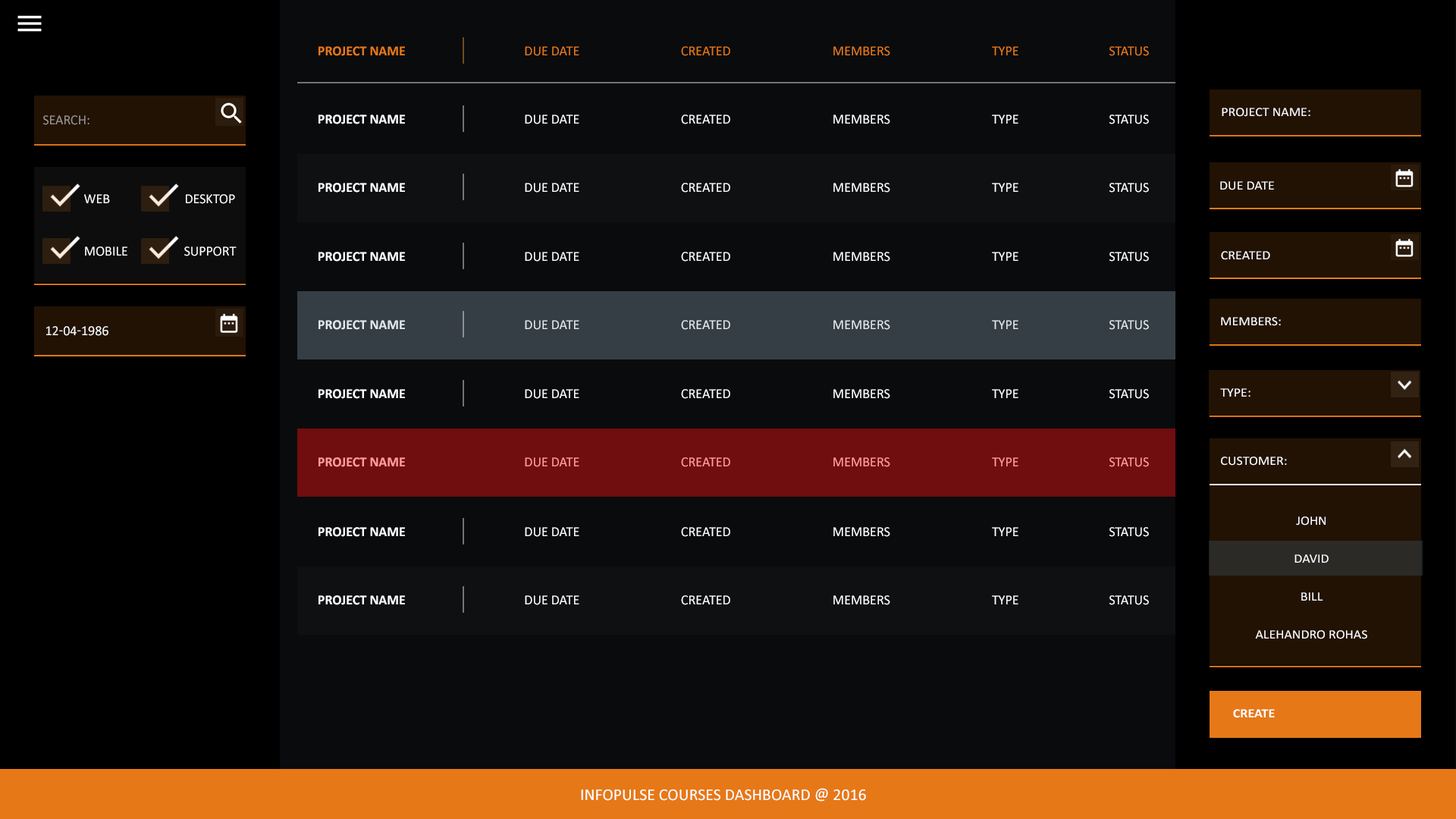
<style>
.page{position:relative;width:1456px;height:819px;background:#0a0b0d}
.page>*{position:absolute;margin:0}
.t1{font:13.6px "Calibri-Bold";color:#e67817;text-transform:uppercase}
.t2{font:13.6px "Calibri";color:#e67817;text-transform:uppercase}
.t3{font:12.8px "Calibri";color:#ffffff;text-transform:uppercase;scale:1.07 1}
.t4{font:13.6px "Calibri";color:#979390;text-transform:uppercase}
.t5{font:13.6px "Calibri-Bold";color:#ffffff;text-transform:uppercase}
.t6{font:13.6px "Calibri";color:#ffffff;text-transform:uppercase}
.t7{font:13.6px "Calibri";color:#feffff;text-transform:uppercase}
.t8{font:13.6px "Calibri-Bold";color:#e1e8ed;text-transform:uppercase}
.t9{font:13.6px "Calibri";color:#e1e8ed;text-transform:uppercase}
.t10{font:13.6px "Calibri-Bold";color:#ff9d9d;text-transform:uppercase}
.t11{font:13.6px "Calibri";color:#ff9d9d;text-transform:uppercase}
.t12{font:12.8px "Calibri-Bold";color:#ffffff;text-transform:uppercase;scale:1.07 1}
.t13{font:16.5px "Calibri";color:#ffffff;text-transform:uppercase}
</style>
<div class="page">
<p class="t1" style="left:318px;top:46px;width:87px;height:10px">project name</p>
<p class="t2" style="left:525px;top:46px;width:54px;height:10px">due date</p>
<p class="t2" style="left:681px;top:46px;width:49px;height:10px">created</p>
<p class="t2" style="left:833px;top:46px;width:57px;height:10px">members</p>
<p class="t2" style="left:992px;top:46px;width:26px;height:9px">type</p>
<p class="t2" style="left:1109px;top:46px;width:40px;height:10px">status</p>
<p class="t3" style="left:1222px;top:108px;width:88px;height:9px">PROJECT NAME:</p>
<p class="t4" style="left:43px;top:115px;width:46px;height:10px">search:</p>
<p class="t5" style="left:318px;top:115px;width:87px;height:9px">project name</p>
<p class="t6" style="left:525px;top:115px;width:54px;height:9px">due date</p>
<p class="t6" style="left:681px;top:115px;width:49px;height:9px">created</p>
<p class="t6" style="left:833px;top:115px;width:57px;height:9px">members</p>
<p class="t6" style="left:992px;top:115px;width:26px;height:9px">type</p>
<p class="t6" style="left:1109px;top:115px;width:40px;height:9px">status</p>
<p class="t5" style="left:318px;top:183px;width:87px;height:10px">project name</p>
<p class="t6" style="left:525px;top:183px;width:54px;height:10px">due date</p>
<p class="t6" style="left:681px;top:183px;width:49px;height:10px">created</p>
<p class="t6" style="left:833px;top:183px;width:57px;height:10px">members</p>
<p class="t6" style="left:992px;top:183px;width:26px;height:9px">type</p>
<p class="t6" style="left:1109px;top:183px;width:40px;height:10px">status</p>
<p class="t3" style="left:1220px;top:181px;width:54px;height:9px">Due date</p>
<p class="t7" style="left:84px;top:194px;width:26px;height:9px">web</p>
<p class="t7" style="left:186px;top:194px;width:49px;height:10px">DESKTOP</p>
<p class="t7" style="left:85px;top:246px;width:42px;height:10px">mobile</p>
<p class="t7" style="left:184px;top:246px;width:53px;height:10px">support</p>
<p class="t5" style="left:318px;top:252px;width:87px;height:10px">project name</p>
<p class="t6" style="left:525px;top:252px;width:54px;height:10px">due date</p>
<p class="t6" style="left:681px;top:252px;width:49px;height:10px">created</p>
<p class="t6" style="left:833px;top:252px;width:57px;height:10px">members</p>
<p class="t6" style="left:992px;top:252px;width:26px;height:9px">type</p>
<p class="t6" style="left:1109px;top:252px;width:40px;height:10px">status</p>
<p class="t3" style="left:1221px;top:251px;width:49px;height:9px">created</p>
<p class="t3" style="left:1221px;top:317px;width:60px;height:9px">members:</p>
<p class="t6" style="left:46px;top:326px;width:62px;height:10px">12-04-1986</p>
<p class="t8" style="left:318px;top:320px;width:87px;height:10px">project name</p>
<p class="t9" style="left:525px;top:320px;width:54px;height:10px">due date</p>
<p class="t9" style="left:681px;top:320px;width:49px;height:10px">created</p>
<p class="t9" style="left:833px;top:320px;width:57px;height:10px">members</p>
<p class="t9" style="left:992px;top:320px;width:26px;height:9px">type</p>
<p class="t9" style="left:1109px;top:320px;width:40px;height:10px">status</p>
<p class="t5" style="left:318px;top:389px;width:87px;height:10px">project name</p>
<p class="t6" style="left:525px;top:389px;width:54px;height:10px">due date</p>
<p class="t6" style="left:681px;top:389px;width:49px;height:10px">created</p>
<p class="t6" style="left:833px;top:389px;width:57px;height:10px">members</p>
<p class="t6" style="left:992px;top:389px;width:26px;height:9px">type</p>
<p class="t6" style="left:1109px;top:389px;width:40px;height:10px">status</p>
<p class="t3" style="left:1220px;top:388px;width:30px;height:9px">type:</p>
<p class="t10" style="left:318px;top:457px;width:87px;height:10px">project name</p>
<p class="t11" style="left:525px;top:457px;width:54px;height:10px">due date</p>
<p class="t11" style="left:681px;top:457px;width:49px;height:10px">created</p>
<p class="t11" style="left:833px;top:457px;width:57px;height:10px">members</p>
<p class="t11" style="left:992px;top:457px;width:26px;height:9px">type</p>
<p class="t11" style="left:1109px;top:457px;width:40px;height:10px">status</p>
<p class="t3" style="left:1221px;top:457px;width:66px;height:9px">CUSTOMER:</p>
<p class="t3" style="left:1296px;top:516px;width:30px;height:10px">John</p>
<p class="t5" style="left:318px;top:527px;width:87px;height:10px">project name</p>
<p class="t6" style="left:525px;top:527px;width:54px;height:10px">due date</p>
<p class="t6" style="left:681px;top:527px;width:49px;height:10px">created</p>
<p class="t6" style="left:833px;top:527px;width:57px;height:10px">members</p>
<p class="t6" style="left:992px;top:527px;width:26px;height:9px">type</p>
<p class="t6" style="left:1109px;top:527px;width:40px;height:10px">status</p>
<p class="t3" style="left:1294px;top:554px;width:35px;height:9px">david</p>
<p class="t3" style="left:1301px;top:592px;width:22px;height:9px">Bill</p>
<p class="t5" style="left:318px;top:595px;width:87px;height:10px">project name</p>
<p class="t6" style="left:525px;top:595px;width:54px;height:10px">due date</p>
<p class="t6" style="left:681px;top:595px;width:49px;height:10px">created</p>
<p class="t6" style="left:833px;top:595px;width:57px;height:10px">members</p>
<p class="t6" style="left:992px;top:595px;width:26px;height:9px">type</p>
<p class="t6" style="left:1109px;top:595px;width:40px;height:10px">status</p>
<p class="t3" style="left:1255px;top:630px;width:112px;height:9px">alehandro rohas</p>
<p class="t12" style="left:1233px;top:709px;width:42px;height:9px">CREATE</p>
<p class="t13" style="left:581px;top:788px;width:285px;height:14px">infopulse courses dashboard @ 2016</p>
</div>
